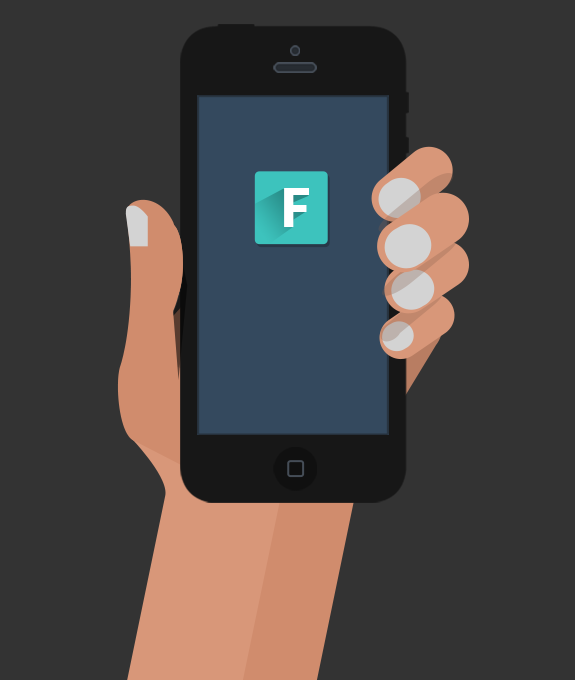
<style>
.page{position:relative;width:575px;height:680px;background:#333333}
.page>*{position:absolute;margin:0}
.t1{font:52.6px "Lato-Black";color:#ffffff}
</style>
<div class="page">
<p class="t1" style="left:284px;top:188px;width:25px;height:39px">F</p>
</div>
